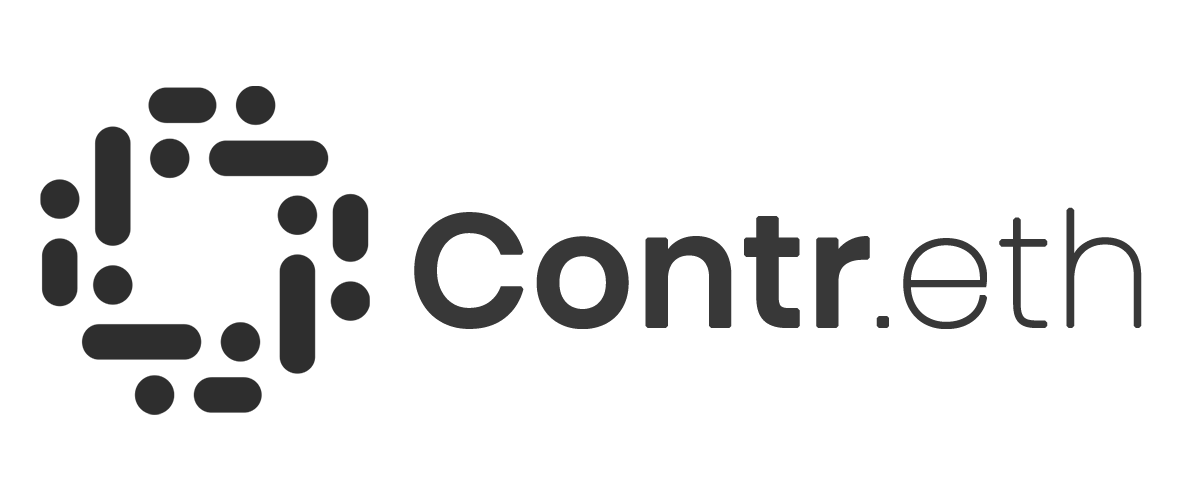
<style>
.page{position:relative;width:1200px;height:500px;background:#ffffff}
.page>*{position:absolute;margin:0}
.t1{font:156.4px "Poppins-Medium";color:#383838;font-weight:bold}
.t2{font:156.4px "Poppins-Thin";color:#383838;font-weight:bold}
</style>
<div class="page">
<p class="t1" style="left:414px;top:207px;width:728px;height:122px">Contr<span class="t2">.eth</span></p>
</div>
